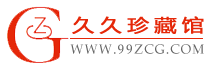
<style>
.page{position:relative;width:213px;height:69px;background:#ffffff}
.page>*{position:absolute;margin:0}
.t1{font:17.8px "MicrosoftYaHei";letter-spacing:0.2em;color:#e52809;text-transform:uppercase;font-weight:bold;scale:1.23 1}
.t2{font:13px "BookAntiqua";letter-spacing:0.1em;color:#666666;text-transform:uppercase}
</style>
<div class="page">
<p class="t1" style="left:72px;top:16px;width:132px;height:18px">久久珍藏馆</p>
<p class="t2" style="left:70px;top:44px;width:134px;height:10px">www.99zcg.com</p>
</div>
